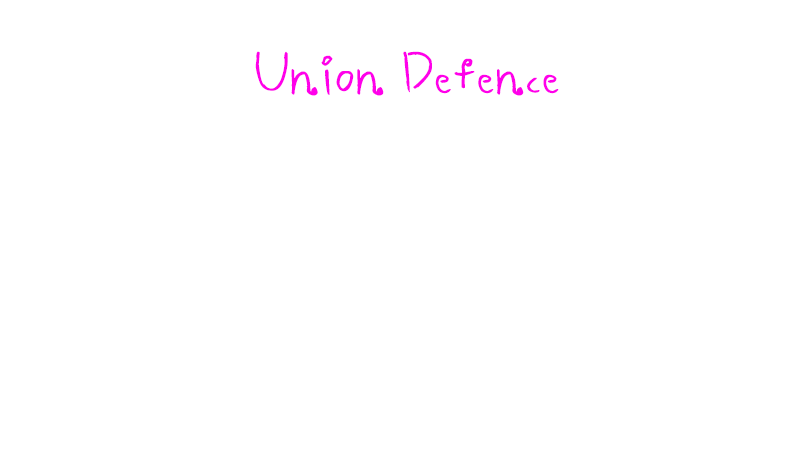
<style>
.page{position:relative;width:800px;height:450px;background:#ffffff}
.page>*{position:absolute;margin:0}
.t1{font:60px "UhBeekairumischiefBold";color:#ff00ea}
</style>
<div class="page">
<p class="t1" style="left:255px;top:51px;width:304px;height:45px">Union Defence</p>
</div>
